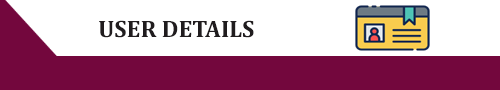
<style>
.page{position:relative;width:500px;height:90px;background:#ffffff}
.page>*{position:absolute;margin:0}
.t1{font:24px "Cambria-Bold";color:#201c1e}
</style>
<div class="page">
<p class="t1" style="left:99px;top:20px;width:155px;height:18px">USER DETAILS</p>
</div>
